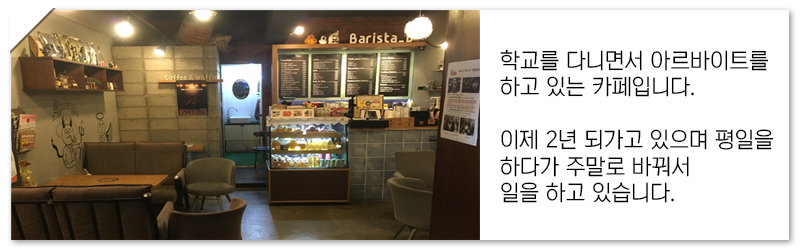
<style>
.page{position:relative;width:800px;height:250px;background:#ffffff}
.page>*{position:absolute;margin:0}
.t1{font:22px "KoreanTITGD1-R";color:#000000}
</style>
<div class="page">
<p class="t1" style="left:500px;top:49px;width:274px;height:154px">학교를 다니면서 아르바이트를 <br>하고 있는 카페입니다.<br><br>이제 2년 되가고 있으며 평일을<br>하다가 주말로 바꿔서 <br>일을 하고 있습니다.</p>
</div>
